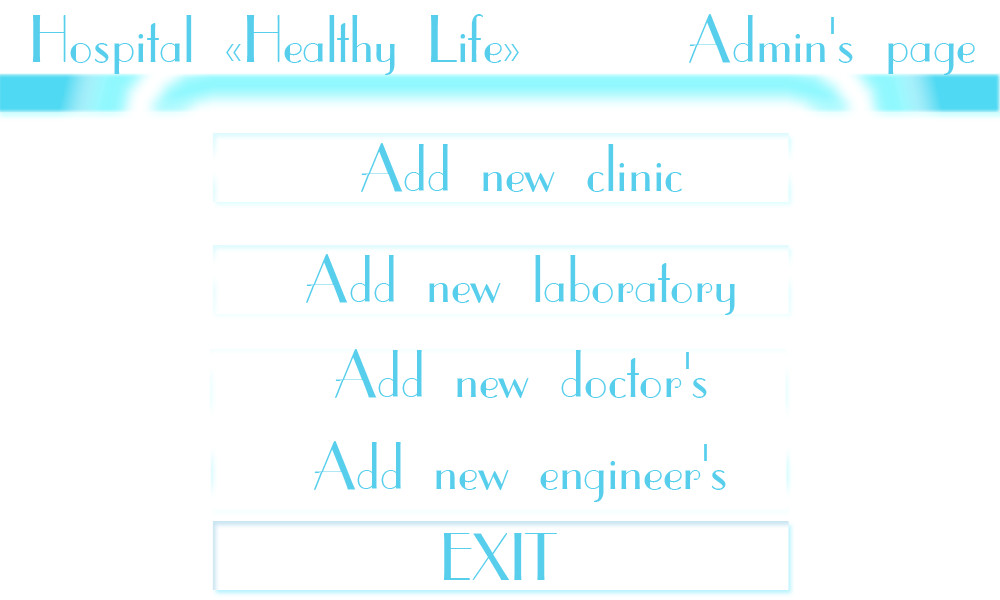
<style>
.page{position:relative;width:1000px;height:600px;background:#ffffff}
.page>*{position:absolute;margin:0}
.t1{font:63.5px "CafeParisC";color:#56ceec}
</style>
<div class="page">
<p class="t1" style="left:33px;top:14px;width:486px;height:61px">Hospital «Healthy Life»</p>
<p class="t1" style="left:689px;top:14px;width:286px;height:61px">Admin's page</p>
<p class="t1" style="left:361px;top:143px;width:321px;height:49px">Add new clinic</p>
<p class="t1" style="left:306px;top:254px;width:429px;height:61px">Add new laboratory</p>
<p class="t1" style="left:335px;top:349px;width:372px;height:49px">Add new doctor's</p>
<p class="t1" style="left:314px;top:441px;width:412px;height:61px">Add new engineer's</p>
<p class="t1" style="left:444px;top:533px;width:113px;height:47px">EXIT</p>
</div>
